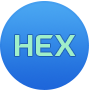
<style>
.page{position:relative;width:90px;height:90px;background:#ffffff}
.page>*{position:absolute;margin:0}
.t1{font:28px "aAstroSpace";color:#a0efc9}
</style>
<div class="page">
<p class="t1" style="left:15px;top:35px;width:61px;height:21px">HEX</p>
</div>
